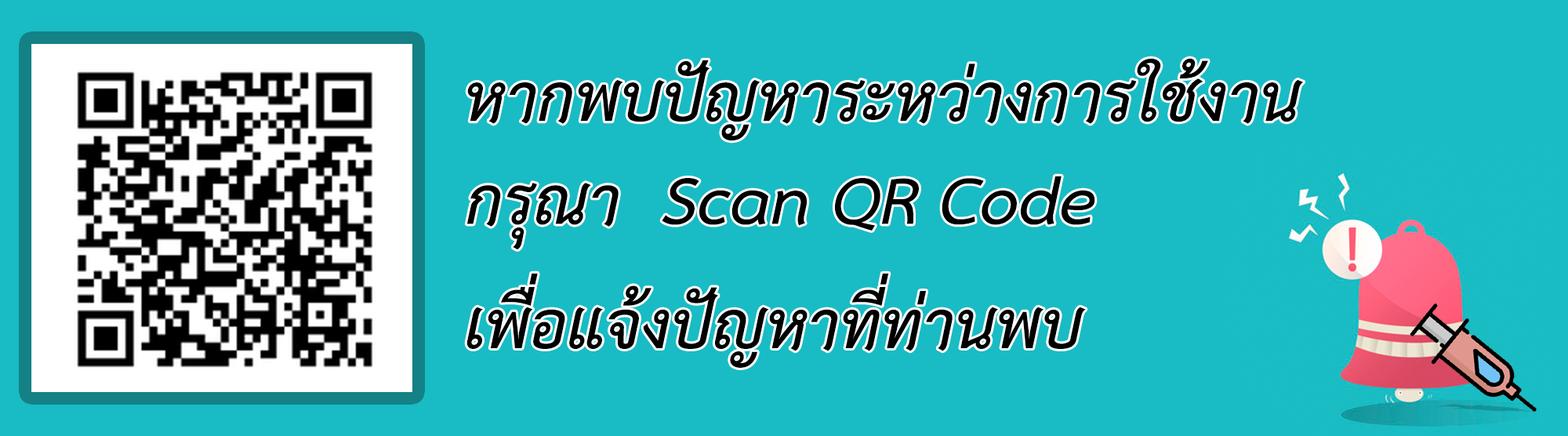
<style>
.page{position:relative;width:1568px;height:436px;background:#19bcc4}
.page>*{position:absolute;margin:0}
.t1{font:94.3px "THSarabunNew-BoldItalic";color:#000000}
</style>
<div class="page">
<p class="t1" style="left:467px;top:58px;width:837px;height:83px">หากพบปัญหาระหว่างการใช้งาน</p>
<p class="t1" style="left:466px;top:176px;width:629px;height:73px">กรุณา  Scan QR Code</p>
<p class="t1" style="left:466px;top:273px;width:620px;height:95px">เพื่อแจ้งปัญหาที่ท่านพบ</p>
</div>
